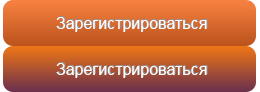
<style>
.page{position:relative;width:260px;height:92px}
.page>*{position:absolute;margin:0}
.t1{font:16px "ArialMT";color:#ffffff}
.t2{font:16px "ArialMT"}
</style>
<div class="page">
<p class="t1" style="left:56px;top:17px;width:151px;height:15px">Зарегистрироваться</p>
<p class="t2" style="left:57px;top:16px;width:151px;height:15px">Зарегистрироваться</p>
<p class="t1" style="left:56px;top:63px;width:151px;height:15px">Зарегистрироваться</p>
<p class="t2" style="left:57px;top:62px;width:151px;height:15px">Зарегистрироваться</p>
</div>
